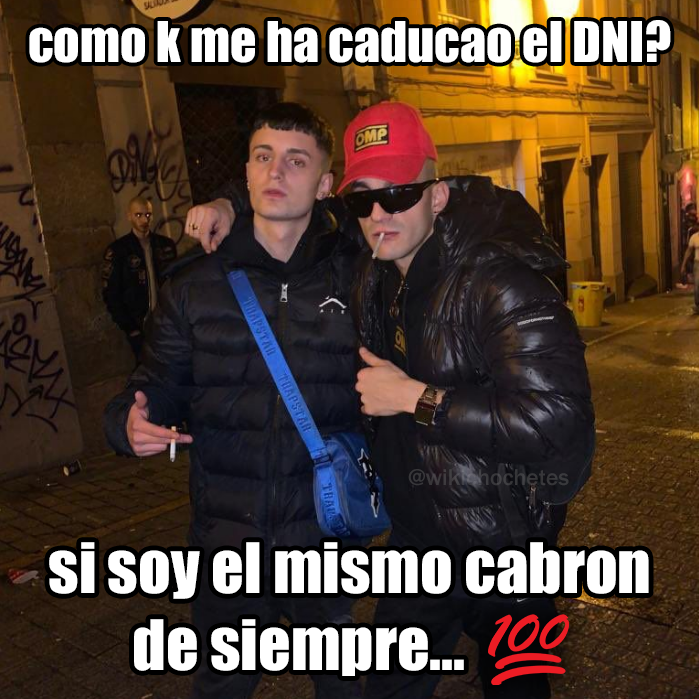
<style>
.page{position:relative;width:699px;height:699px}
.page>*{position:absolute;margin:0}
.t1{font:52px "Impact";color:#ffffff}
.t2{font:23.6px "FranklinGothic-Medium";color:#3b393d}
.t3{font:64.3px "Impact";color:#ffffff}
</style>
<div class="page">
<p class="t1" style="left:29px;top:20px;width:642px;height:43px">como k me ha caducao el DNI?</p>
<p class="t2" style="left:408px;top:469px;width:161px;height:17px">@wikichochetes</p>
<p class="t3" style="left:49px;top:542px;width:600px;height:134px;text-align:center">si soy el mismo cabron<br>de siempre...</p>
</div>
